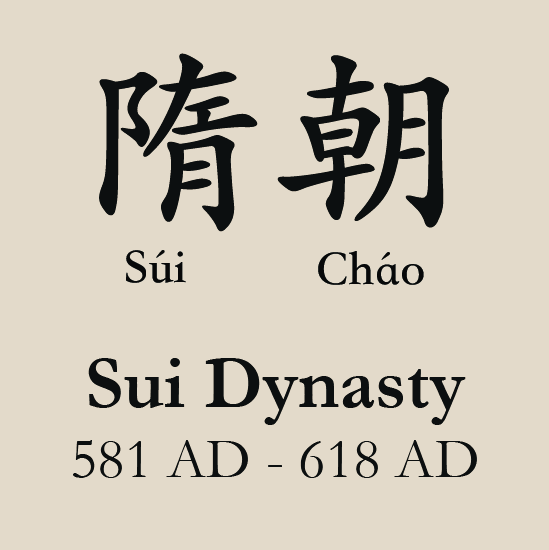
<style>
.page{position:relative;width:549px;height:550px;background:#e3daca}
.page>*{position:absolute;margin:0}
.t1{font:200px "STKaiti-SC-Bold";color:#070809}
.t2{font:50px "STKaiti-SC-Bold";color:#070809}
.t3{font:58.3px "Garamond";color:#070809}
.t4{font:75px "Garamond-Bold";color:#070809}
</style>
<div class="page">
<p class="t1" style="left:99px;top:53px;width:350px;height:179px">隋朝</p>
<p class="t2" style="left:126px;top:250px;width:60px;height:33px">Súi</p>
<p class="t2" style="left:318px;top:251px;width:106px;height:34px">Cháo</p>
<p class="t3" style="left:73px;top:358px;width:404px;height:120px;text-align:center"><span class="t4">Sui Dynasty<br></span>581 AD - 618 AD</p>
</div>
